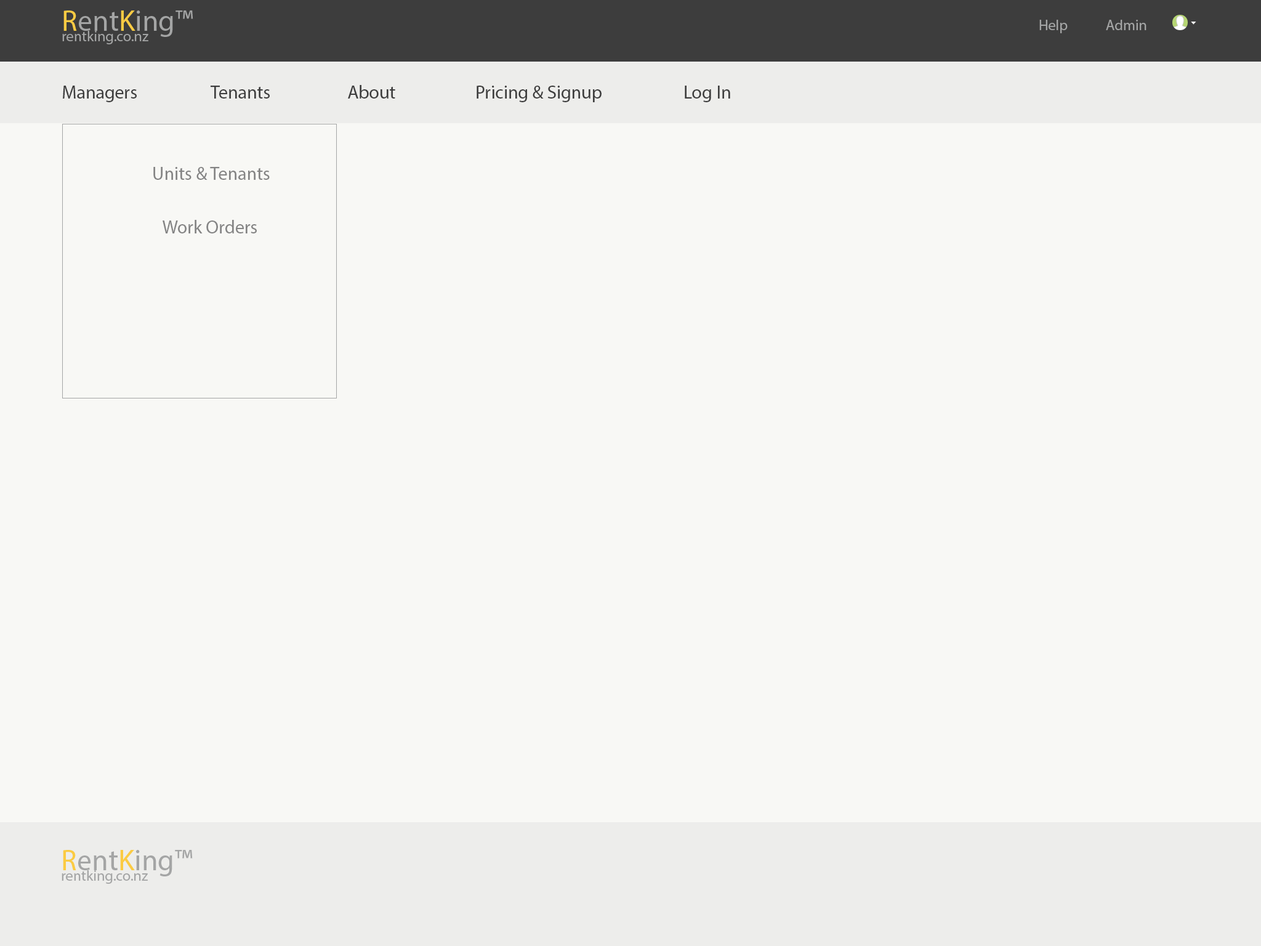
<style>
.page{position:relative;width:1261px;height:946px;background:#f8f8f5}
.page>*{position:absolute;margin:0}
.t1{font:14.8px "MyriadPro-Regular";color:#a4a5a5}
.t2{font:18.5px "MyriadPro-Regular";color:#3d3d3d}
.t3{font:18.5px "MyriadPro-Regular";color:#848484}
</style>
<div class="page">
<p class="t1" style="left:1039px;top:20px;width:29px;height:13px">Help</p>
<p class="t1" style="left:1106px;top:20px;width:40px;height:10px">Admin</p>
<p class="t2" style="left:63px;top:86px;width:74px;height:16px">Managers</p>
<p class="t2" style="left:211px;top:86px;width:59px;height:13px">Tenants</p>
<p class="t2" style="left:348px;top:85px;width:47px;height:14px">About</p>
<p class="t2" style="left:477px;top:86px;width:125px;height:16px">Pricing &amp; Signup</p>
<p class="t2" style="left:685px;top:86px;width:45px;height:16px">Log In</p>
<p class="t3" style="left:153px;top:167px;width:117px;height:13px">Units &amp; Tenants</p>
<p class="t3" style="left:163px;top:220px;width:94px;height:13px">Work Orders</p>
</div>
